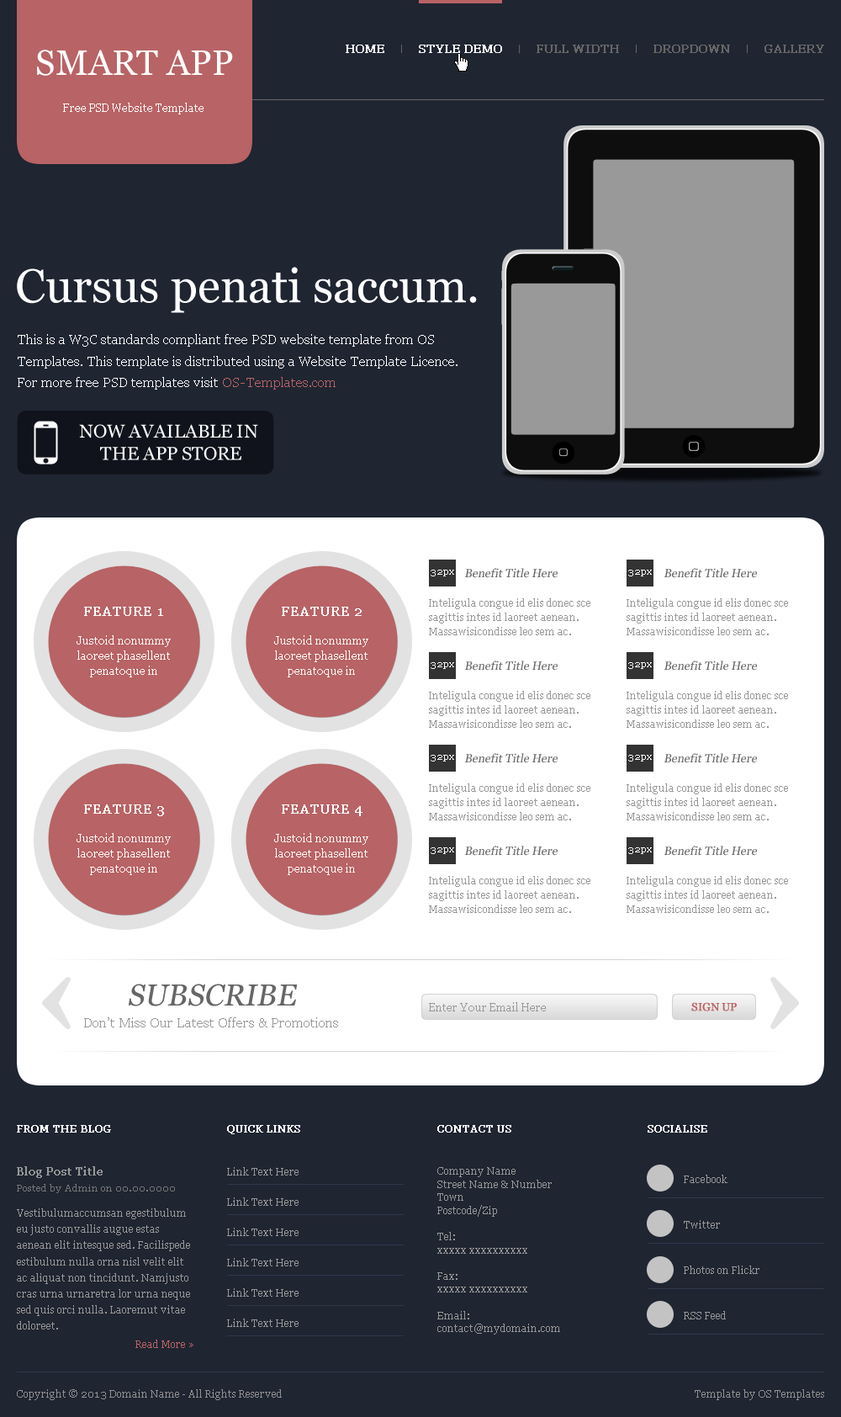
<style>
.page{position:relative;width:841px;height:1417px;background:#1f2531}
.page>*{position:absolute;margin:0}
.t1{font:35.3px "Georgia";color:#ffffff}
.t2{font:11.8px "Georgia";color:#ffffff;font-weight:bold}
.t3{font:11.8px "Georgia";color:#666666;font-weight:bold}
.t4{font:10.9px "Georgia";color:#ffffff}
.t5{font:47.1px "Georgia";color:#ffffff}
.t6{font:13.5px/21.5px "Georgia";color:#ffffff}
.t7{font:13.5px/21.5px "Georgia";color:#b86365}
.t8{font:18.5px/22.2px "Georgia";color:#ffffff}
.t9{font:9.3px "Georgia";color:#ffffff}
.t10{font:11.8px "Georgia";color:#666666;font-style:italic}
.t11{font:10.1px/14.1px "Georgia";color:#989898}
.t12{font:13.5px "Georgia";color:#ffffff;font-weight:bold}
.t13{font:10.9px/15.3px "Georgia";color:#ffffff}
.t14{font:30.3px "Georgia";color:#666666;font-style:italic}
.t15{font:10.9px "Georgia";color:#989898}
.t16{font:10.9px "Georgia";color:#b86365;text-transform:uppercase;font-weight:bold}
.t17{font:13.5px "Georgia";color:#989898}
.t18{font:10.1px "Georgia";color:#ffffff;font-weight:bold}
.t19{font:10.9px "Georgia";color:#989898;font-weight:bold}
.t20{font:10.1px "Georgia";color:#989898}
.t21{font:10.1px/13.1px "Georgia";color:#989898}
.t22{font:9.3px "Georgia";color:#757575}
.t23{font:10.1px/16.2px "Georgia";color:#989898}
.t24{font:10.1px "Georgia";color:#b86365}
.t25{font:10.1px "Georgia";color:#919191}
</style>
<div class="page">
<p class="t1" style="left:37px;top:50px;width:196px;height:26px">SMART APP</p>
<p class="t2" style="left:346px;top:45px;width:39px;height:8px">HOME</p>
<p class="t2" style="left:419px;top:45px;width:83px;height:8px">STYLE DEMO</p>
<p class="t3" style="left:537px;top:45px;width:82px;height:8px">FULL WIDTH</p>
<p class="t3" style="left:654px;top:45px;width:76px;height:8px">DROPDOWN</p>
<p class="t3" style="left:765px;top:45px;width:60px;height:8px">GALLERY</p>
<p class="t4" style="left:63px;top:103px;width:141px;height:11px">Free PSD Website Template</p>
<p class="t5" style="left:17px;top:267px;width:460px;height:46px">Cursus penati saccum.</p>
<p class="t6" style="left:18px;top:334px;width:440px;height:56px">This is a W3C standards compliant free PSD website template from OS Templates. This template is distributed using a Website Template Licence. For more free PSD templates visit <span class="t7">OS-Templates.com</span></p>
<p class="t8" style="left:79px;top:424px;width:179px;height:36px;text-align:center">NOW AVAILABLE IN <br>THE APP STORE</p>
<p class="t9" style="left:431px;top:570px;width:23px;height:6px">32px</p>
<p class="t10" style="left:464px;top:568px;width:94px;height:10px">Benefit Title Here</p>
<p class="t9" style="left:629px;top:570px;width:23px;height:6px">32px</p>
<p class="t10" style="left:664px;top:568px;width:93px;height:10px">Benefit Title Here</p>
<p class="t11" style="left:429px;top:598px;width:162px;height:37px">Inteligula congue id elis donec sce sagittis intes id laoreet aenean. Massawisicondisse leo sem ac.</p>
<p class="t11" style="left:627px;top:598px;width:161px;height:37px">Inteligula congue id elis donec sce sagittis intes id laoreet aenean. Massawisicondisse leo sem ac.</p>
<p class="t12" style="left:84px;top:607px;width:79px;height:9px">FEATURE 1</p>
<p class="t12" style="left:282px;top:607px;width:80px;height:9px">FEATURE 2</p>
<p class="t13" style="left:77px;top:635px;width:94px;height:42px;text-align:center">Justoid nonummy laoreet phasellent penatoque in</p>
<p class="t13" style="left:274px;top:635px;width:95px;height:42px;text-align:center">Justoid nonummy laoreet phasellent penatoque in</p>
<p class="t9" style="left:431px;top:662px;width:23px;height:7px">32px</p>
<p class="t10" style="left:464px;top:661px;width:94px;height:10px">Benefit Title Here</p>
<p class="t9" style="left:629px;top:662px;width:23px;height:7px">32px</p>
<p class="t10" style="left:664px;top:661px;width:93px;height:10px">Benefit Title Here</p>
<p class="t11" style="left:429px;top:691px;width:162px;height:37px">Inteligula congue id elis donec sce sagittis intes id laoreet aenean. Massawisicondisse leo sem ac.</p>
<p class="t11" style="left:627px;top:691px;width:161px;height:37px">Inteligula congue id elis donec sce sagittis intes id laoreet aenean. Massawisicondisse leo sem ac.</p>
<p class="t9" style="left:431px;top:755px;width:23px;height:7px">32px</p>
<p class="t10" style="left:464px;top:753px;width:94px;height:10px">Benefit Title Here</p>
<p class="t9" style="left:629px;top:755px;width:23px;height:7px">32px</p>
<p class="t10" style="left:664px;top:753px;width:93px;height:10px">Benefit Title Here</p>
<p class="t11" style="left:429px;top:783px;width:162px;height:37px">Inteligula congue id elis donec sce sagittis intes id laoreet aenean. Massawisicondisse leo sem ac.</p>
<p class="t11" style="left:627px;top:783px;width:161px;height:37px">Inteligula congue id elis donec sce sagittis intes id laoreet aenean. Massawisicondisse leo sem ac.</p>
<p class="t12" style="left:84px;top:804px;width:80px;height:12px">FEATURE 3</p>
<p class="t12" style="left:282px;top:804px;width:81px;height:12px">FEATURE 4</p>
<p class="t13" style="left:77px;top:833px;width:94px;height:42px;text-align:center">Justoid nonummy laoreet phasellent penatoque in</p>
<p class="t13" style="left:274px;top:833px;width:95px;height:42px;text-align:center">Justoid nonummy laoreet phasellent penatoque in</p>
<p class="t10" style="left:464px;top:846px;width:94px;height:10px">Benefit Title Here</p>
<p class="t10" style="left:664px;top:846px;width:93px;height:10px">Benefit Title Here</p>
<p class="t9" style="left:431px;top:847px;width:23px;height:7px">32px</p>
<p class="t9" style="left:629px;top:847px;width:23px;height:7px">32px</p>
<p class="t11" style="left:429px;top:876px;width:162px;height:37px">Inteligula congue id elis donec sce sagittis intes id laoreet aenean. Massawisicondisse leo sem ac.</p>
<p class="t11" style="left:627px;top:876px;width:161px;height:37px">Inteligula congue id elis donec sce sagittis intes id laoreet aenean. Massawisicondisse leo sem ac.</p>
<p class="t14" style="left:129px;top:984px;width:169px;height:22px">SUBSCRIBE</p>
<p class="t15" style="left:429px;top:1002px;width:117px;height:9px">Enter Your Email Here</p>
<p class="t16" style="left:692px;top:1002px;width:45px;height:9px">SIGN UP</p>
<p class="t17" style="left:84px;top:1017px;width:254px;height:10px">Don’t Miss Our Latest Offers &amp; Promotions</p>
<p class="t18" style="left:17px;top:1125px;width:94px;height:8px">FROM THE BLOG</p>
<p class="t18" style="left:227px;top:1125px;width:73px;height:9px">QUICK LINKS</p>
<p class="t18" style="left:438px;top:1125px;width:74px;height:8px">CONTACT US</p>
<p class="t18" style="left:648px;top:1125px;width:60px;height:8px">SOCIALISE</p>
<p class="t19" style="left:17px;top:1166px;width:86px;height:12px">Blog Post Title</p>
<p class="t20" style="left:227px;top:1167px;width:72px;height:9px">Link Text Here</p>
<p class="t21" style="left:438px;top:1167px;width:122px;height:168px">Company Name<br>Street Name &amp; Number<br>Town<br>Postcode/Zip<br><br>Tel:<br>xxxxx xxxxxxxxxx<br><br>Fax:<br>xxxxx xxxxxxxxxx<br><br>Email:<br>contact@mydomain.com</p>
<p class="t20" style="left:684px;top:1175px;width:44px;height:8px">Facebook</p>
<p class="t22" style="left:17px;top:1184px;width:158px;height:9px">Posted by Admin on 00.00.0000</p>
<p class="t20" style="left:227px;top:1197px;width:72px;height:9px">Link Text Here</p>
<p class="t23" style="left:17px;top:1208px;width:173px;height:122px">Vestibulumaccumsan egestibulum eu justo convallis augue estas aenean elit intesque sed. Facilispede estibulum nulla orna nisl velit elit ac aliquat non tincidunt. Namjusto cras urna urnaretra lor urna neque sed quis orci nulla. Laoremut vitae doloreet.</p>
<p class="t20" style="left:227px;top:1228px;width:72px;height:8px">Link Text Here</p>
<p class="t20" style="left:684px;top:1220px;width:36px;height:9px">Twitter</p>
<p class="t20" style="left:227px;top:1258px;width:72px;height:8px">Link Text Here</p>
<p class="t20" style="left:684px;top:1266px;width:76px;height:8px">Photos on Flickr</p>
<p class="t20" style="left:227px;top:1288px;width:72px;height:9px">Link Text Here</p>
<p class="t20" style="left:684px;top:1311px;width:42px;height:8px">RSS Feed</p>
<p class="t20" style="left:227px;top:1319px;width:72px;height:8px">Link Text Here</p>
<p class="t24" style="left:135px;top:1340px;width:59px;height:8px">Read More »</p>
<p class="t25" style="left:17px;top:1389px;width:265px;height:11px">Copyright © 2013 Domain Name - All Rights Reserved</p>
<p class="t25" style="left:695px;top:1389px;width:130px;height:11px">Template by OS Templates</p>
</div>
